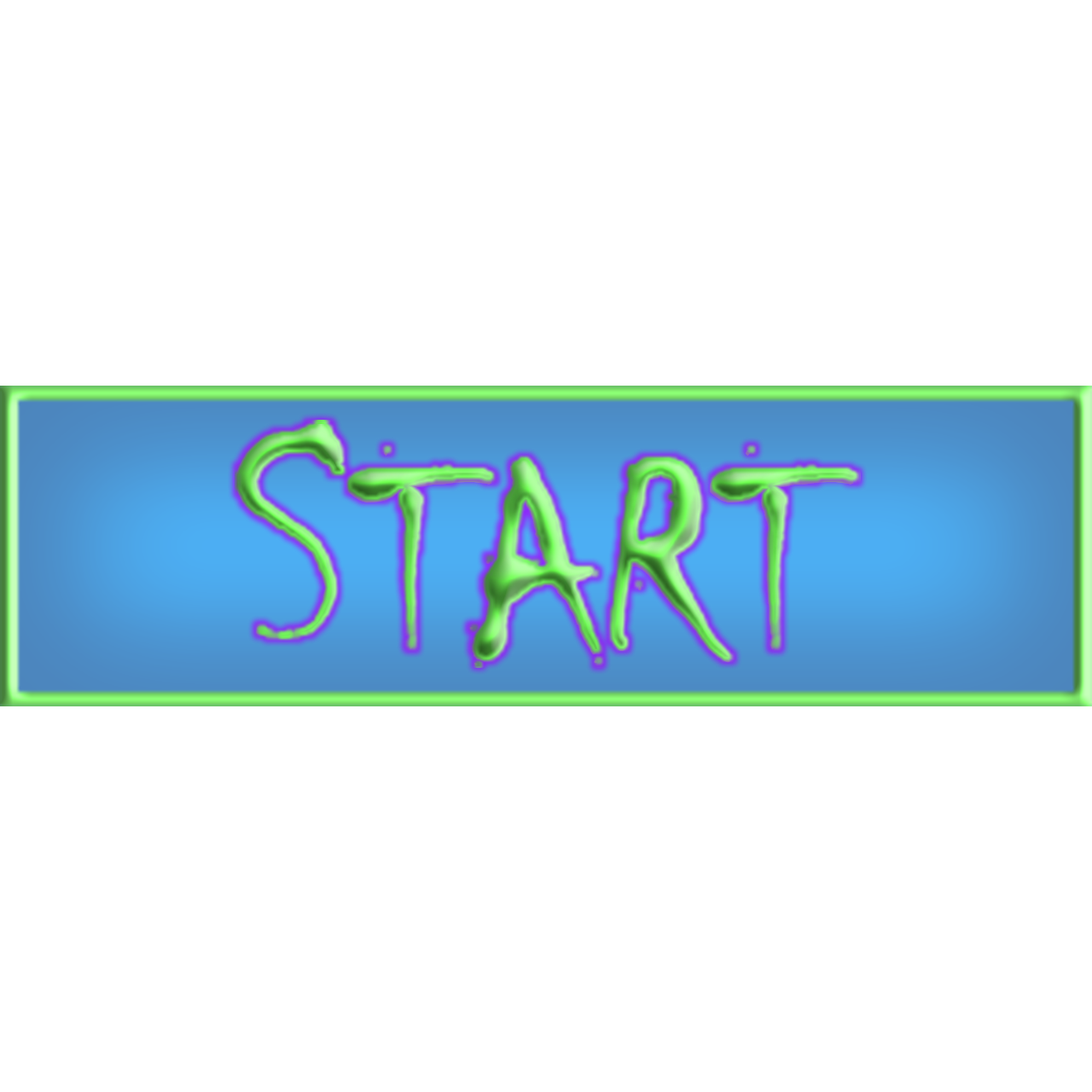
<style>
.page{position:relative;width:1092px;height:1092px;background:#ffffff}
.page>*{position:absolute;margin:0}
.t1{font:273px "Chiller-Regular"}
.t2{font:364px "Chiller-Regular"}
</style>
<div class="page">
<p class="t1" style="left:235px;top:423px;width:619px;height:242px"><span class="t2">S</span>TART</p>
</div>
